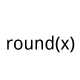
<style>
.page{position:relative;width:80px;height:80px;background:#ffffff}
.page>*{position:absolute;margin:0}
.t1{font:18px "DroidSans";color:#000000}
</style>
<div class="page">
<p class="t1" style="left:7px;top:35px;width:68px;height:18px">round(x)</p>
</div>
